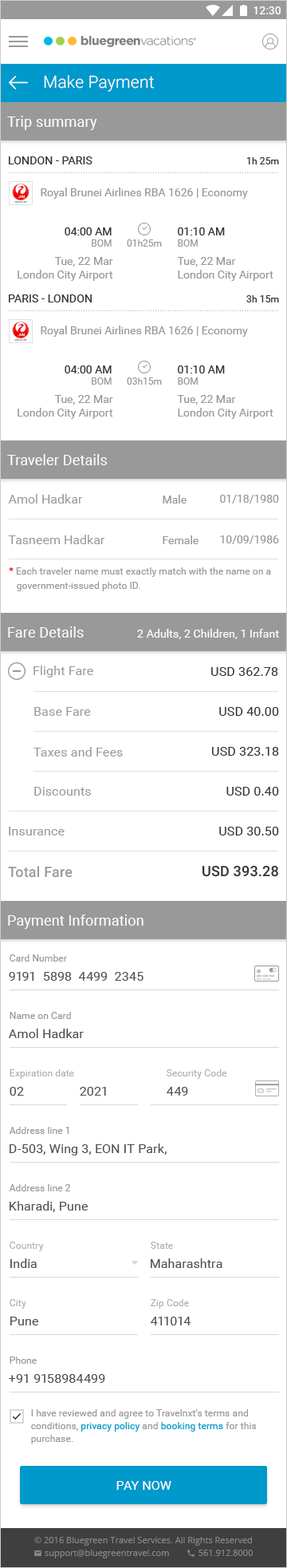
<style>
.page{position:relative;width:287px;height:1568px;background:#ffffff}
.page>*{position:absolute;margin:0}
.t1{font:16.8px "Roboto-Light";letter-spacing:0.01em;color:#ffffff}
.t2{font:14.4px "Roboto-Regular";letter-spacing:0.01em;color:#ffffff}
.t3{font:11.2px "Roboto-Regular";letter-spacing:0.01em;color:#333333;text-transform:uppercase}
.t4{font:9.6px "Roboto-Regular";letter-spacing:0.01em;color:#333333}
.t5{font:11.2px "Roboto-Regular";color:#999999}
.t6{font:11.2px "Roboto-Regular";color:#333333}
.t7{font:9.6px "Roboto-Regular";color:#999999}
.t8{font:12.8px "Roboto-Regular";color:#999999}
.t9{font:9.6px/14.4px "Roboto-Regular";letter-spacing:0.01em;color:#999999}
.t10{font:9.6px/14.4px "Roboto-Regular";letter-spacing:0.01em;color:#ee0000}
.t11{font:11.2px "Roboto-Regular";letter-spacing:0.01em;color:#ffffff}
.t12{font:12.8px "Roboto-Regular";letter-spacing:0.01em;color:#999999}
.t13{font:12.8px "Roboto-Regular";letter-spacing:0.01em;color:#333333}
.t14{font:14.4px "Roboto-Medium";letter-spacing:0.01em;color:#999999}
.t15{font:14.4px "Roboto-Medium";letter-spacing:0.01em;color:#333333}
.t16{font:9.6px "Roboto-Regular";letter-spacing:0.01em;color:#999999}
.t17{font:12.8px "Roboto-Regular";letter-spacing:0.01em;color:#4d4d4d}
.t18{font:9.6px "Roboto-Regular";letter-spacing:0.01em;color:#b1b1b1}
.t19{font:9.6px/12.8px "Roboto-Regular";letter-spacing:0.01em;color:#999999}
.t20{font:9.6px/12.8px "Roboto-Regular";letter-spacing:0.01em;color:#0099cc}
.t21{font:12.8px "Roboto-Regular";letter-spacing:0.01em;color:#ffffff;text-transform:uppercase}
</style>
<div class="page">
<p class="t1" style="left:44px;top:75px;width:110px;height:17px">Make Payment</p>
<p class="t2" style="left:7px;top:116px;width:90px;height:14px">Trip summary</p>
<p class="t3" style="left:9px;top:156px;width:84px;height:8px">london - paris</p>
<p class="t4" style="left:247px;top:157px;width:32px;height:7px">1h 25m</p>
<p class="t5" style="left:41px;top:188px;width:207px;height:11px">Royal Brunei Airlines RBA 1626 | Economy</p>
<p class="t6" style="left:65px;top:227px;width:47px;height:20px;text-align:right">04:00 AM<br><span class="t7">BOM</span></p>
<p class="t6" style="left:178px;top:227px;width:47px;height:20px">01:10 AM<br><span class="t7">BOM</span></p>
<p class="t7" style="left:127px;top:239px;width:35px;height:8px">01h25m</p>
<p class="t5" style="left:18px;top:257px;width:95px;height:24px;text-align:right">Tue, 22 Mar<br>London City Airport</p>
<p class="t5" style="left:177px;top:257px;width:97px;height:24px">Tue, 22 Mar<br>London City Airport</p>
<p class="t3" style="left:9px;top:294px;width:83px;height:8px">paris - london</p>
<p class="t4" style="left:247px;top:295px;width:32px;height:7px">3h 15m</p>
<p class="t5" style="left:41px;top:326px;width:207px;height:11px">Royal Brunei Airlines RBA 1626 | Economy</p>
<p class="t6" style="left:65px;top:365px;width:47px;height:20px;text-align:right">04:00 AM<br><span class="t7">BOM</span></p>
<p class="t6" style="left:178px;top:365px;width:47px;height:20px">01:10 AM<br><span class="t7">BOM</span></p>
<p class="t7" style="left:127px;top:377px;width:35px;height:8px">03h15m</p>
<p class="t5" style="left:18px;top:395px;width:95px;height:24px;text-align:right">Tue, 22 Mar<br>London City Airport</p>
<p class="t5" style="left:177px;top:395px;width:97px;height:24px">Tue, 22 Mar<br>London City Airport</p>
<p class="t2" style="left:7px;top:454px;width:100px;height:11px">Traveler Details</p>
<p class="t8" style="left:8px;top:494px;width:75px;height:10px">Amol Hadkar</p>
<p class="t5" style="left:163px;top:495px;width:24px;height:9px">Male</p>
<p class="t5" style="left:220px;top:495px;width:59px;height:9px">01/18/1980</p>
<p class="t8" style="left:8px;top:535px;width:97px;height:9px">Tasneem Hadkar</p>
<p class="t5" style="left:163px;top:535px;width:36px;height:9px">Female</p>
<p class="t5" style="left:220px;top:535px;width:59px;height:9px">10/09/1986</p>
<p class="t9" style="left:9px;top:567px;width:262px;height:24px"><span class="t10">* </span>Each traveler name must exactly match with the name on a        government-issued photo ID.</p>
<p class="t2" style="left:8px;top:626px;width:76px;height:12px">Fare Details</p>
<p class="t11" style="left:137px;top:629px;width:142px;height:10px">2 Adults, 2 Children, 1 Infant</p>
<p class="t12" style="left:34px;top:666px;width:59px;height:11px">Flight Fare</p>
<p class="t13" style="left:211px;top:667px;width:67px;height:9px">USD 362.78</p>
<p class="t12" style="left:34px;top:707px;width:57px;height:9px">Base Fare</p>
<p class="t13" style="left:219px;top:707px;width:60px;height:9px">USD 40.00</p>
<p class="t12" style="left:34px;top:747px;width:89px;height:9px">Taxes and Fees</p>
<p class="t13" style="left:212px;top:747px;width:67px;height:9px">USD 323.18</p>
<p class="t12" style="left:34px;top:787px;width:57px;height:9px">Discounts</p>
<p class="t13" style="left:227px;top:787px;width:52px;height:9px">USD 0.40</p>
<p class="t12" style="left:9px;top:827px;width:56px;height:8px">Insurance</p>
<p class="t13" style="left:219px;top:827px;width:60px;height:8px">USD 30.50</p>
<p class="t14" style="left:8px;top:866px;width:65px;height:12px">Total Fare</p>
<p class="t15" style="left:203px;top:866px;width:75px;height:11px">USD 393.28</p>
<p class="t2" style="left:8px;top:914px;width:136px;height:15px">Payment Information</p>
<p class="t16" style="left:10px;top:954px;width:57px;height:8px">Card Number</p>
<p class="t17" style="left:9px;top:972px;width:135px;height:9px">9191  5898  4499  2345</p>
<p class="t16" style="left:10px;top:1012px;width:61px;height:7px">Name on Card</p>
<p class="t17" style="left:9px;top:1029px;width:75px;height:9px">Amol Hadkar</p>
<p class="t18" style="left:10px;top:1069px;width:64px;height:10px">Expiration date</p>
<p class="t18" style="left:167px;top:1069px;width:60px;height:10px">Security Code</p>
<p class="t17" style="left:10px;top:1087px;width:14px;height:9px">02</p>
<p class="t17" style="left:80px;top:1087px;width:26px;height:9px">2021</p>
<p class="t17" style="left:167px;top:1087px;width:21px;height:9px">449</p>
<p class="t16" style="left:9px;top:1127px;width:60px;height:7px">Address line 1</p>
<p class="t17" style="left:10px;top:1143px;width:157px;height:12px">D-503, Wing 3, EON IT Park,</p>
<p class="t16" style="left:9px;top:1184px;width:62px;height:7px">Address line 2</p>
<p class="t17" style="left:10px;top:1201px;width:78px;height:11px">Kharadi, Pune</p>
<p class="t18" style="left:10px;top:1242px;width:34px;height:9px">Country</p>
<p class="t18" style="left:151px;top:1242px;width:22px;height:7px">State</p>
<p class="t17" style="left:10px;top:1258px;width:27px;height:10px">India</p>
<p class="t17" style="left:151px;top:1258px;width:72px;height:10px">Maharashtra</p>
<p class="t18" style="left:10px;top:1299px;width:16px;height:10px">City</p>
<p class="t18" style="left:151px;top:1299px;width:38px;height:10px">Zip Code</p>
<p class="t17" style="left:10px;top:1317px;width:28px;height:8px">Pune</p>
<p class="t17" style="left:151px;top:1317px;width:40px;height:8px">411014</p>
<p class="t16" style="left:10px;top:1357px;width:27px;height:7px">Phone</p>
<p class="t17" style="left:9px;top:1374px;width:96px;height:9px">+91 9158984499</p>
<p class="t19" style="left:31px;top:1409px;width:226px;height:35px">I have reviewed and agree to Travelnxt's terms and conditions, <span class="t20">privacy policy</span> and <span class="t20">booking terms</span> for this purchase.</p>
<p class="t21" style="left:117px;top:1481px;width:55px;height:9px">pay now</p>
</div>
